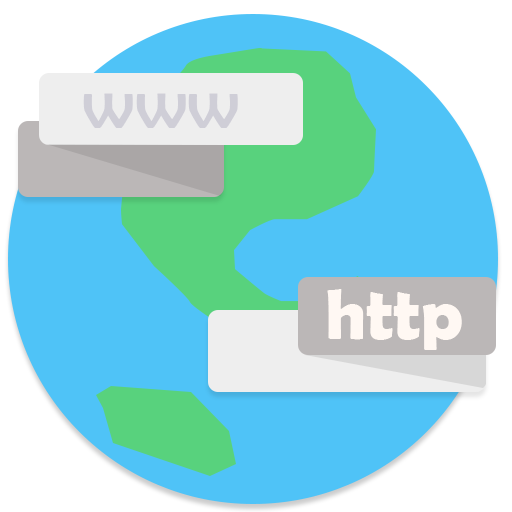
<style>
.page{position:relative;width:512px;height:512px;background:#4fc3f7}
.page>*{position:absolute;margin:0}
.t1{font:72px "BerlinSansFB-Reg";color:#cfced7}
.t2{font:72px "BerlinSansFBDemi-Bold";color:#fff8f3}
</style>
<div class="page">
<p class="t1" style="left:83px;top:93px;width:155px;height:35px">www</p>
<p class="t2" style="left:327px;top:289px;width:135px;height:61px">http</p>
</div>
